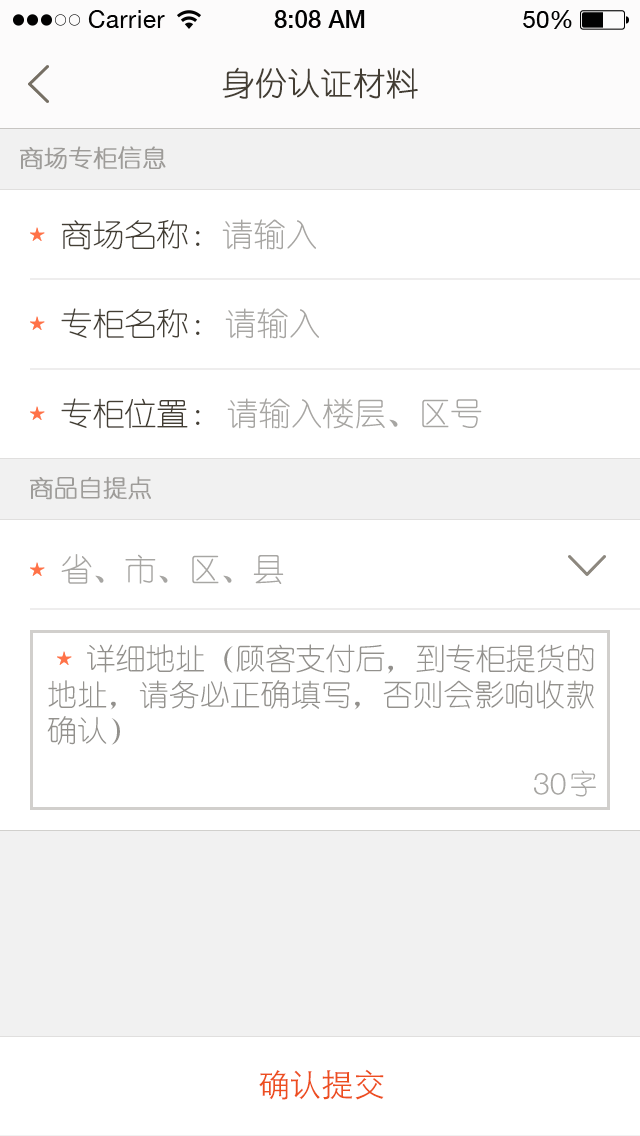
<style>
.page{position:relative;width:640px;height:1136px;background:#ffffff}
.page>*{position:absolute;margin:0}
.t1{font:32px "YouYuan";color:#433d33;text-transform:uppercase;font-weight:bold}
.t2{font:24px "YouYuan";color:#9e9c99;text-transform:uppercase;font-weight:bold}
.t3{font:32px "YouYuan";color:#433e34;text-transform:uppercase}
.t4{font:32px "YouYuan";color:#a7a6a3;text-transform:uppercase}
.t5{font:30px "YouYuan";color:#93918d;text-transform:uppercase}
.t6{font:30px "HelveticaNeueLTPro-Lt";color:#a7a6a3;text-transform:uppercase}
.t7{font:28px "YouYuan";color:#a7a6a3;text-transform:uppercase}
.t8{font:32px "STHeitiSC-Light";color:#ed4e1f;text-transform:uppercase}
</style>
<div class="page">
<p class="t1" style="left:222px;top:67px;width:196px;height:32px">身份认证材料</p>
<p class="t2" style="left:20px;top:146px;width:146px;height:24px">商场专柜信息</p>
<p class="t3" style="left:61px;top:220px;width:139px;height:30px">商场名称：</p>
<p class="t4" style="left:222px;top:219px;width:94px;height:31px">请输入</p>
<p class="t3" style="left:61px;top:308px;width:139px;height:31px">专柜名称：</p>
<p class="t4" style="left:225px;top:308px;width:94px;height:31px">请输入</p>
<p class="t3" style="left:61px;top:398px;width:139px;height:31px">专柜位置：</p>
<p class="t4" style="left:227px;top:398px;width:255px;height:31px">请输入楼层、区号</p>
<p class="t2" style="left:30px;top:476px;width:121px;height:24px">商品自提点</p>
<p class="t4" style="left:61px;top:554px;width:223px;height:30px">省、市、区、县</p>
<p class="t5" style="left:47px;top:644px;width:547px;height:101px;text-align:justify">详细地址（顾客支付后，到专柜提货的地址，请务必正确填写，否则会影响收款确认）</p>
<p class="t6" style="left:534px;top:773px;width:32px;height:22px">30</p>
<p class="t7" style="left:571px;top:770px;width:25px;height:27px">字</p>
<p class="t8" style="left:259px;top:1069px;width:125px;height:31px">确认提交</p>
</div>
